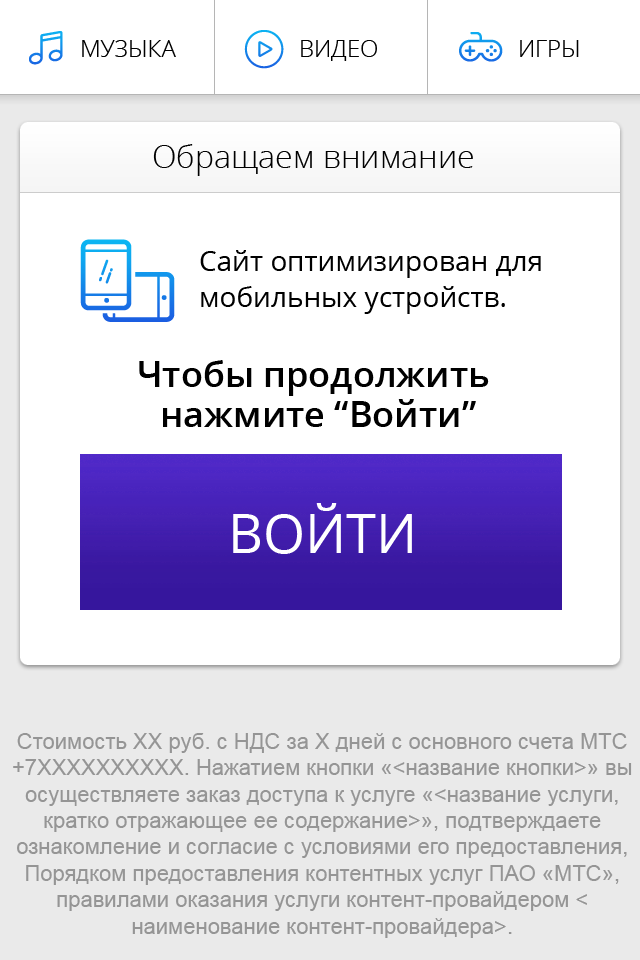
<style>
.page{position:relative;width:640px;height:960px;background:#ffffff}
.page>*{position:absolute;margin:0}
.t1{font:24px "OpenSans-Light";color:#000000}
.t2{font:32px "OpenSans-Light";color:#000000}
.t3{font:28px/36px "OpenSans";color:#000000}
.t4{font:36px/40px "OpenSans-Semibold";color:#000000}
.t5{font:54.2px "OpenSans";color:#ffffff}
.t6{font:22px "ArialMT";color:#959595}
</style>
<div class="page">
<p class="t1" style="left:82px;top:40px;width:94px;height:17px">МУЗЫКА</p>
<p class="t1" style="left:301px;top:40px;width:76px;height:21px">ВИДЕО</p>
<p class="t1" style="left:520px;top:40px;width:59px;height:17px">ИГРЫ</p>
<p class="t2" style="left:153px;top:144px;width:320px;height:32px">Обращаем внимание</p>
<p class="t3" style="left:200px;top:250px;width:341px;height:64px">Сайт оптимизирован для<br>мобильных устройств.</p>
<p class="t4" style="left:139px;top:360px;width:350px;height:67px;text-align:center">Чтобы продолжить <br>нажмите “Войти”</p>
<p class="t5" style="left:233px;top:503px;width:179px;height:51px">ВОЙТИ</p>
<p class="t6" style="left:13px;top:733px;width:619px;height:205px;text-align:center">Стоимость ХХ руб. с НДС за X дней с основного счета МТС +7XXXXXXXXXX. Нажатием кнопки «&lt;название кнопки&gt;» вы осуществляете заказ доступа к услуге «&lt;название услуги, кратко отражающее ее содержание&gt;», подтверждаете ознакомление и согласие с условиями его предоставления, Порядком предоставления контентных услуг ПАО «МТС», правилами оказания услуги контент-провайдером &lt;наименование контент-провайдера&gt;.</p>
</div>
